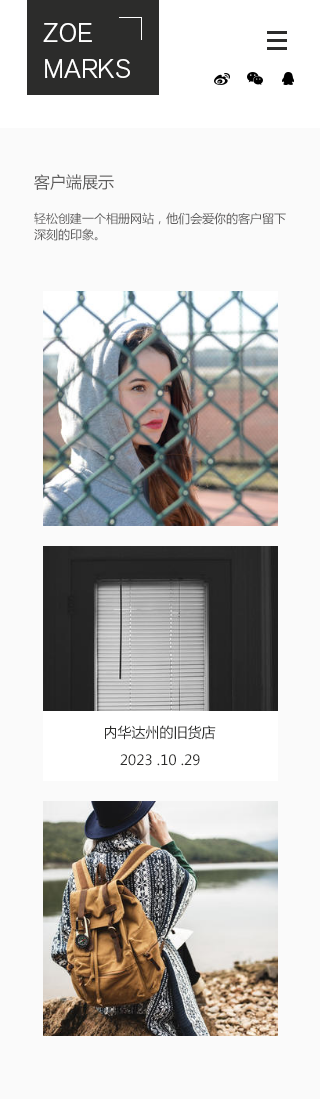
<style>
.page{position:relative;width:320px;height:1099px;background:#fafafa}
.page>*{position:absolute;margin:0}
.t1{font:26px/36px "AkzidenzGroteskBQ-LightSC";color:#ffffff}
.t2{font:16px "MicrosoftYaHei";color:#5e5d5d}
.t3{font:12px/16px "MicrosoftYaHei";color:#5e5d5d}
.t4{font:14px "MicrosoftYaHei";color:#2c2c2b}
</style>
<div class="page">
<p class="t1" style="left:43px;top:23px;width:87px;height:55px">ZOE<br>MARKS</p>
<p class="t2" style="left:34px;top:174px;width:80px;height:16px">客户端展示</p>
<p class="t3" style="left:34px;top:212px;width:252px;height:29px">轻松创建一个相册网站，他们会爱你的客户留下<br>深刻的印象。</p>
<p class="t4" style="left:105px;top:725px;width:111px;height:15px">内华达州的旧货店</p>
<p class="t4" style="left:120px;top:754px;width:80px;height:12px">2023 .10 .29</p>
</div>
